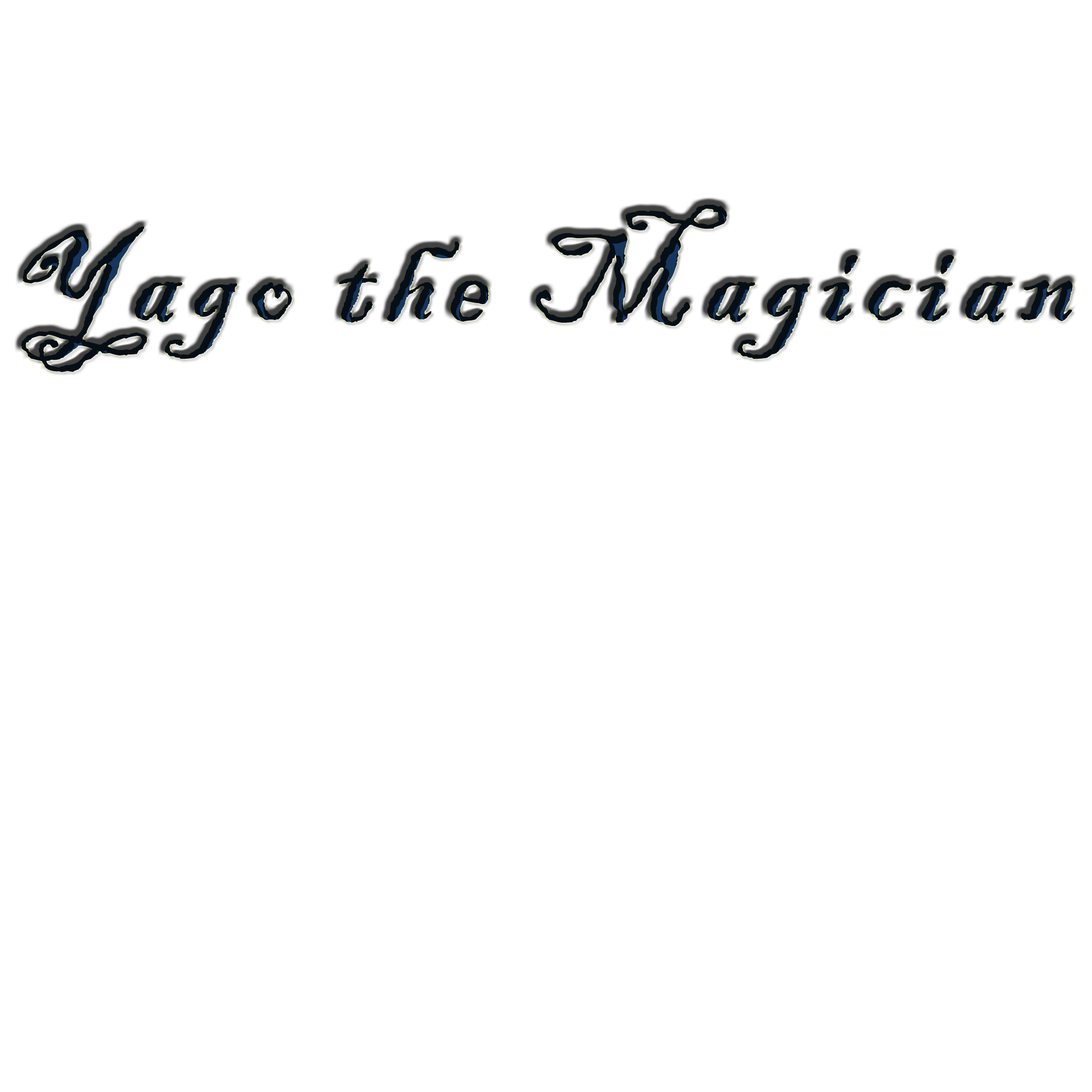
<style>
.page{position:relative;width:1092px;height:1092px;background:#ffffff}
.page>*{position:absolute;margin:0}
.t1{font:136.5px "BlackadderITC-Regular";letter-spacing:0.075em;color:#060e17}
</style>
<div class="page">
<p class="t1" style="left:21px;top:205px;width:1052px;height:167px">Yago the Magician</p>
</div>
